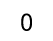
<style>
.page{position:relative;width:53px;height:41px;background:#ffffff}
.page>*{position:absolute;margin:0}
.t1{font:23.7px "DroidSans";color:#000000}
</style>
<div class="page">
<p class="t1" style="left:21px;top:13px;width:11px;height:18px">0</p>
</div>
